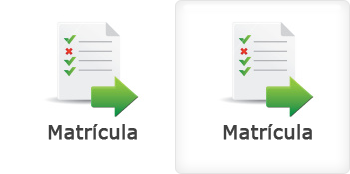
<style>
.page{position:relative;width:350px;height:174px;background:#ffffff}
.page>*{position:absolute;margin:0}
.t1{font:19px "Verdana";color:#404040;font-weight:bold}
</style>
<div class="page">
<p class="t1" style="left:48px;top:124px;width:89px;height:16px">Matrícula</p>
<p class="t1" style="left:223px;top:124px;width:89px;height:16px">Matrícula</p>
</div>
